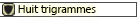
<style>
.page{position:relative;width:140px;height:19px;background:#ffffff}
.page>*{position:absolute;margin:0}
.t1{font:10.9px "LaoUI";color:#000000}
</style>
<div class="page">
<p class="t1" style="left:18px;top:5px;width:78px;height:10px">Huit trigrammes</p>
</div>
